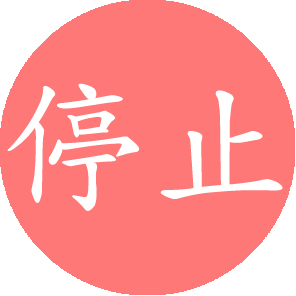
<style>
.page{position:relative;width:296px;height:296px;background:#ff7878}
.page>*{position:absolute;margin:0}
.t1{font:145.8px "DFKaiShu-SB-Estd-BF";color:#ffffff}
</style>
<div class="page">
<p class="t1" style="left:7px;top:83px;width:276px;height:128px">停止</p>
</div>
